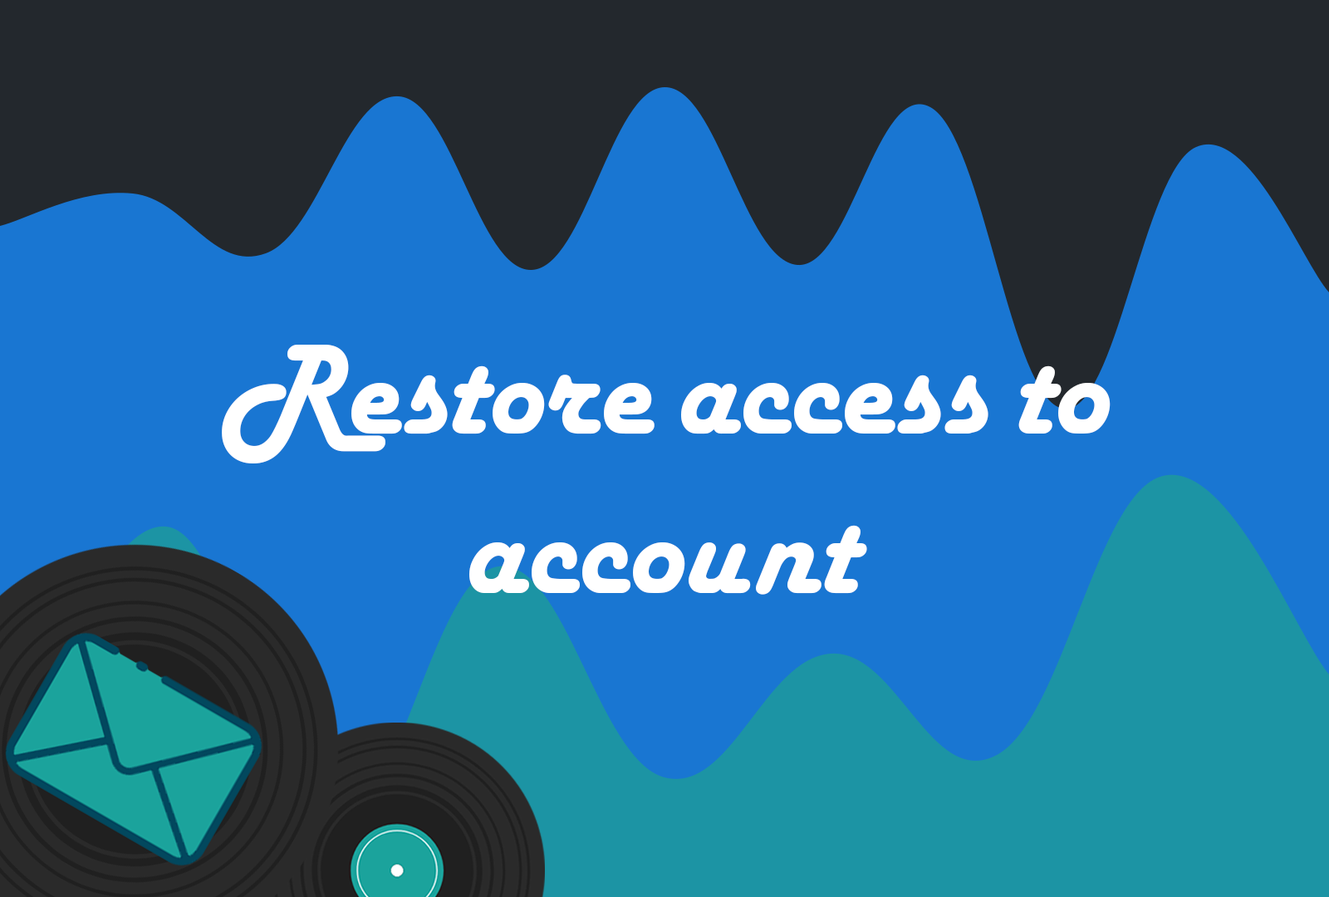
<style>
.page{position:relative;width:1329px;height:897px;background:#1976d2}
.page>*{position:absolute;margin:0}
.t1{font:132.9px "HarlowSolidPlain";color:#ffffff}
</style>
<div class="page">
<p class="t1" style="left:222px;top:345px;width:889px;height:250px;text-align:center">Restore access to account</p>
</div>
